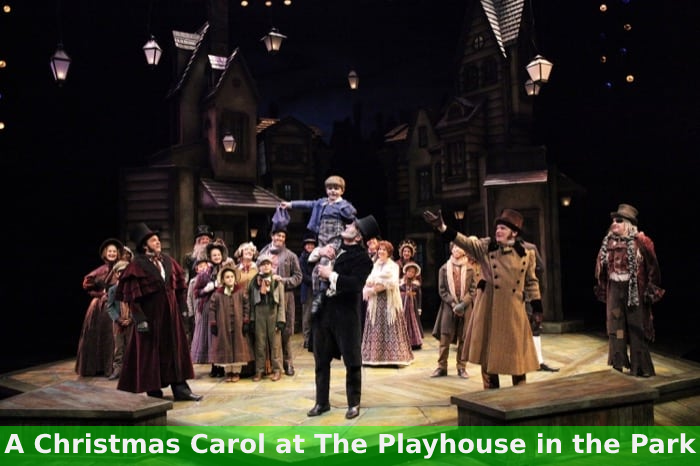
<style>
.page{position:relative;width:700px;height:466px}
.page>*{position:absolute;margin:0}
.t1{font:26px "DejaVuSans-Bold";color:#f1f1f1}
</style>
<div class="page">
<p class="t1" style="left:4px;top:433px;width:693px;height:26px">A Christmas Carol at The Playhouse in the Park</p>
</div>
